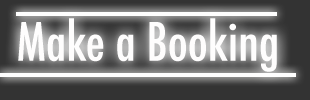
<style>
.page{position:relative;width:310px;height:100px;background:#333333}
.page>*{position:absolute;margin:0}
.t1{font:51.3px "Futura-CondensedMedium";color:#fefdfd}
</style>
<div class="page">
<p class="t1" style="left:18px;top:18px;width:259px;height:54px">Make a Booking</p>
</div>
